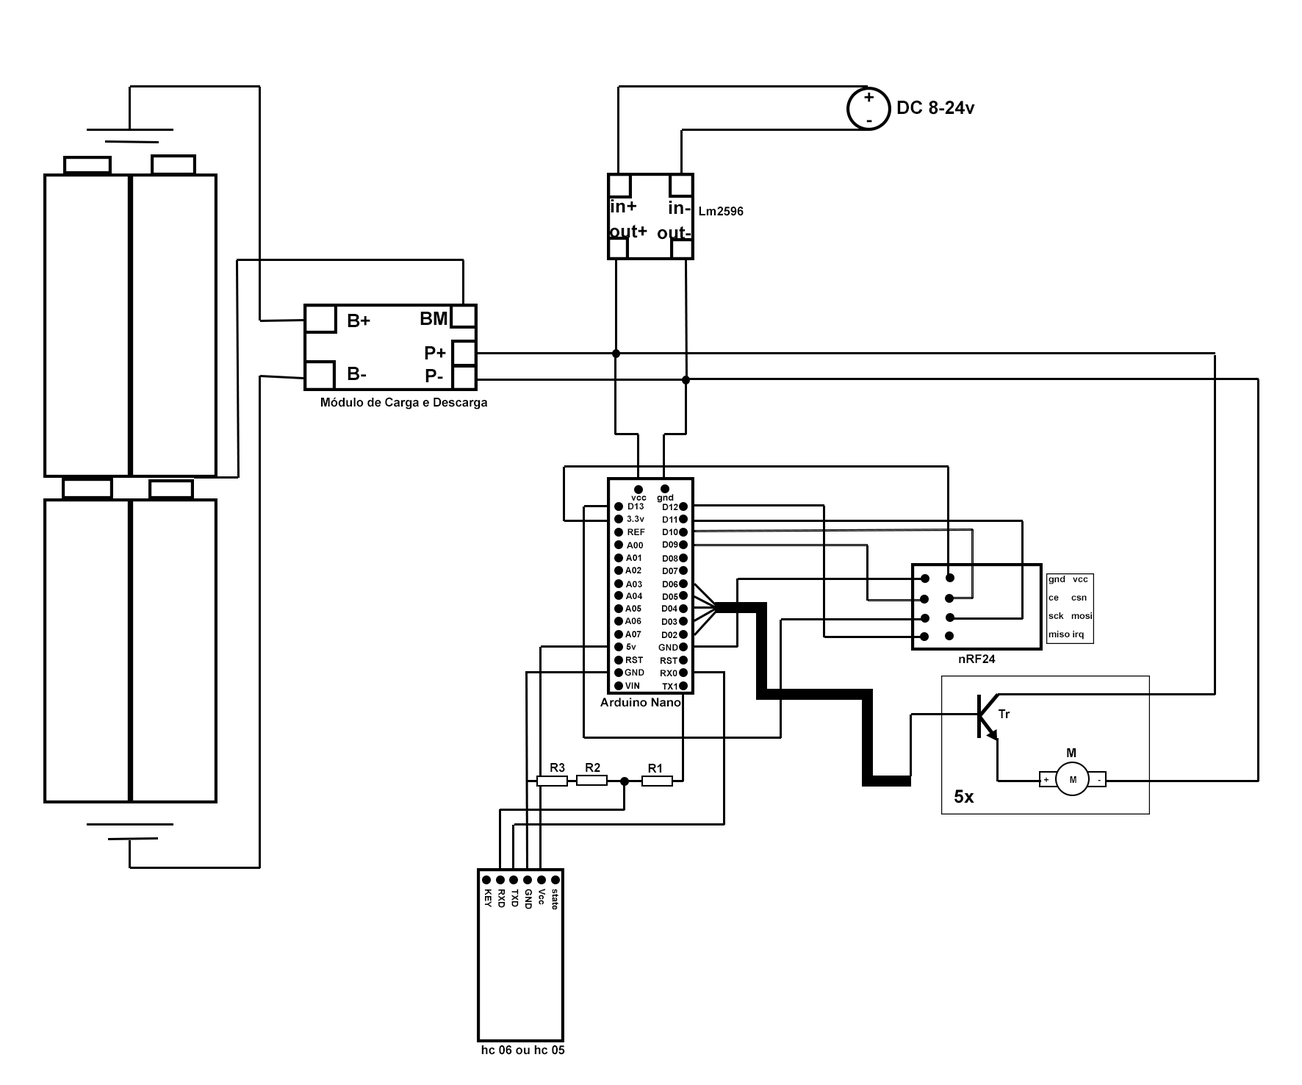
<style>
.page{position:relative;width:1302px;height:1085px;background:#ffffff}
.page>*{position:absolute;margin:0}
.t1{font:18.5px "Arial-BoldMT";color:#000000}
.t2{font:12.2px "Arial-BoldMT";color:#000000}
.t3{font:18.4px "Arial-BoldMT";color:#000000}
.t4{font:8.9px "Arial-BoldMT";color:#000000;scale:1.04 1}
.t5{font:8.9px "Arial-BoldMT";color:#000000;scale:1.03 1}
.t6{font:9px "Arial-BoldMT";color:#000000}
.t7{font:8.9px "Arial-BoldMT";color:#000000}
.t8{font:9.1px/18.4px "Arial-BoldMT";color:#000000}
.t9{font:11.9px "Arial-BoldMT";color:#000000}
.t10{font:12.5px "Arial-BoldMT";color:#000000}
.t11{font:9.2px "Arial-BoldMT";color:#000000}
.t12{font:8.9px/13.5px "Arial-BoldMT";color:#000000}
</style>
<div class="page">
<p class="t1" style="left:864px;top:93px;width:10px;height:30px;text-align:center">+<br>-</p>
<p class="t1" style="left:897px;top:100px;width:78px;height:15px">DC 8-24v</p>
<p class="t1" style="left:611px;top:199px;width:25px;height:13px">in+</p>
<p class="t1" style="left:669px;top:201px;width:22px;height:13px">in-</p>
<p class="t2" style="left:699px;top:207px;width:45px;height:9px">Lm2596</p>
<p class="t3" style="left:610px;top:224px;width:37px;height:14px">out+</p>
<p class="t3" style="left:658px;top:226px;width:33px;height:14px">out-</p>
<p class="t1" style="left:348px;top:314px;width:22px;height:13px">B+</p>
<p class="t1" style="left:420px;top:312px;width:28px;height:13px">BM</p>
<p class="t1" style="left:425px;top:346px;width:21px;height:13px">P+</p>
<p class="t1" style="left:348px;top:367px;width:18px;height:13px">B-</p>
<p class="t1" style="left:426px;top:369px;width:17px;height:13px">P-</p>
<p class="t2" style="left:321px;top:397px;width:167px;height:12px">Módulo de Carga e Descarga</p>
<p class="t4" style="left:631px;top:495px;width:16px;height:5px">vcc</p>
<p class="t5" style="left:657px;top:494px;width:17px;height:9px">gnd</p>
<p class="t6" style="left:628px;top:503px;width:16px;height:6px">D13</p>
<p class="t7" style="left:663px;top:503px;width:15px;height:7px">D12</p>
<p class="t7" style="left:627px;top:515px;width:18px;height:7px">3.3v</p>
<p class="t7" style="left:663px;top:516px;width:14px;height:7px">D11</p>
<p class="t6" style="left:628px;top:528px;width:17px;height:7px">REF</p>
<p class="t7" style="left:663px;top:528px;width:15px;height:7px">D10</p>
<p class="t6" style="left:627px;top:542px;width:16px;height:6px">A00</p>
<p class="t7" style="left:663px;top:541px;width:15px;height:7px">D09</p>
<p class="t7" style="left:626px;top:554px;width:16px;height:7px">A01</p>
<p class="t7" style="left:663px;top:555px;width:15px;height:6px">D08</p>
<p class="t7" style="left:625px;top:567px;width:17px;height:6px">A02</p>
<p class="t7" style="left:663px;top:567px;width:15px;height:7px">D07</p>
<p class="t6" style="left:625px;top:581px;width:17px;height:6px">A03</p>
<p class="t7" style="left:663px;top:581px;width:15px;height:6px">D06</p>
<p class="t8" style="left:1049px;top:575px;width:43px;height:64px">gnd   vcc<br>ce     csn<br>sck   mosi<br>miso irq</p>
<p class="t6" style="left:625px;top:592px;width:17px;height:7px">A04</p>
<p class="t7" style="left:663px;top:593px;width:15px;height:7px">D05</p>
<p class="t7" style="left:625px;top:605px;width:17px;height:6px">A05</p>
<p class="t7" style="left:662px;top:605px;width:16px;height:6px">D04</p>
<p class="t6" style="left:625px;top:617px;width:17px;height:7px">A06</p>
<p class="t7" style="left:662px;top:618px;width:16px;height:7px">D03</p>
<p class="t7" style="left:625px;top:631px;width:17px;height:6px">A07</p>
<p class="t7" style="left:662px;top:631px;width:16px;height:7px">D02</p>
<p class="t4" style="left:626px;top:643px;width:10px;height:7px">5v</p>
<p class="t7" style="left:659px;top:644px;width:19px;height:7px">GND</p>
<p class="t7" style="left:626px;top:656px;width:17px;height:8px">RST</p>
<p class="t7" style="left:661px;top:657px;width:17px;height:7px">RST</p>
<p class="t9" style="left:959px;top:654px;width:37px;height:9px">nRF24</p>
<p class="t7" style="left:625px;top:669px;width:20px;height:7px">GND</p>
<p class="t7" style="left:661px;top:670px;width:17px;height:6px">RX0</p>
<p class="t7" style="left:625px;top:682px;width:14px;height:7px">VIN</p>
<p class="t7" style="left:662px;top:683px;width:16px;height:6px">TX1</p>
<p class="t9" style="left:600px;top:697px;width:81px;height:10px">Arduino Nano</p>
<p class="t2" style="left:999px;top:709px;width:12px;height:9px">Tr</p>
<p class="t10" style="left:1067px;top:747px;width:9px;height:10px">M</p>
<p class="t2" style="left:550px;top:763px;width:15px;height:9px">R3</p>
<p class="t2" style="left:586px;top:763px;width:14px;height:9px">R2</p>
<p class="t2" style="left:648px;top:764px;width:13px;height:8px">R1</p>
<p class="t11" style="left:1044px;top:776px;width:57px;height:7px">+        M        -</p>
<p class="t3" style="left:955px;top:789px;width:20px;height:14px">5x</p>
<p class="t12" style="left:485px;top:889px;width:74px;height:21px;rotate:90deg">state<br>Vcc<br>GND<br>TXD<br>RXD<br>KEY</p>
<p class="t2" style="left:481px;top:1045px;width:84px;height:10px">hc 06 ou hc 05</p>
</div>
